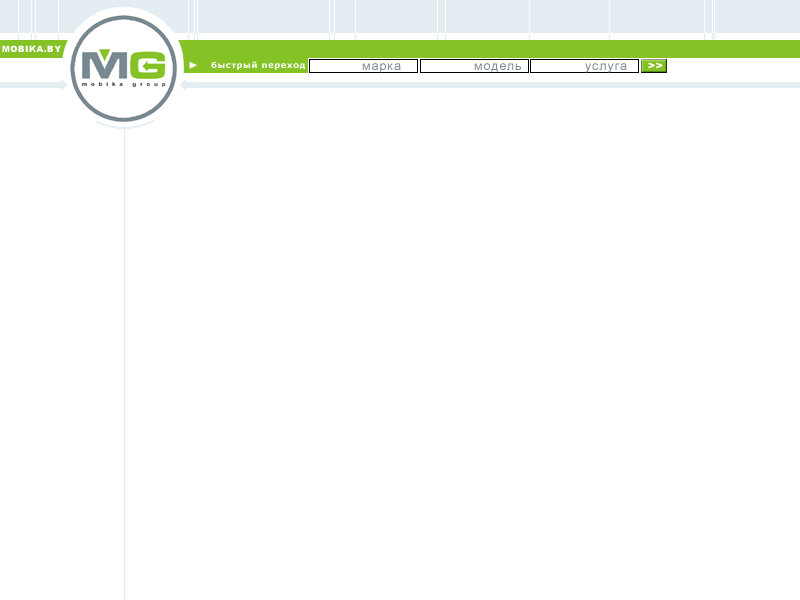
<style>
.page{position:relative;width:800px;height:600px;background:#ffffff}
.page>*{position:absolute;margin:0}
.t1{font:8.3px "Arial-Black";letter-spacing:0.075em;color:#ffffff}
.t2{font:8.3px "Verdana-Bold";letter-spacing:0.075em;color:#ffffff}
.t3{font:12.5px "ArialMT";letter-spacing:0.075em;color:#788992}
.t4{font:9.1px "Arial-Black";letter-spacing:0.075em;color:#ffffff;scale:1.14 1}
</style>
<div class="page">
<p class="t1" style="left:2px;top:45px;width:59px;height:7px">MOBIKA.BY</p>
<p class="t2" style="left:211px;top:61px;width:94px;height:9px">быстрый переход</p>
<p class="t3" style="left:474px;top:63px;width:47px;height:9px">модель</p>
<p class="t4" style="left:648px;top:62px;width:15px;height:7px">&gt;&gt;</p>
</div>
